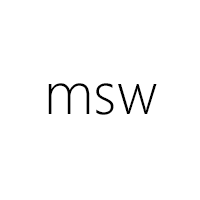
<style>
.page{position:relative;width:200px;height:200px;background:#ffffff}
.page>*{position:absolute;margin:0}
.t1{font:60px "SegoeUI-Light";color:#000000}
</style>
<div class="page">
<p class="t1" style="left:48px;top:83px;width:109px;height:32px">msw</p>
</div>
